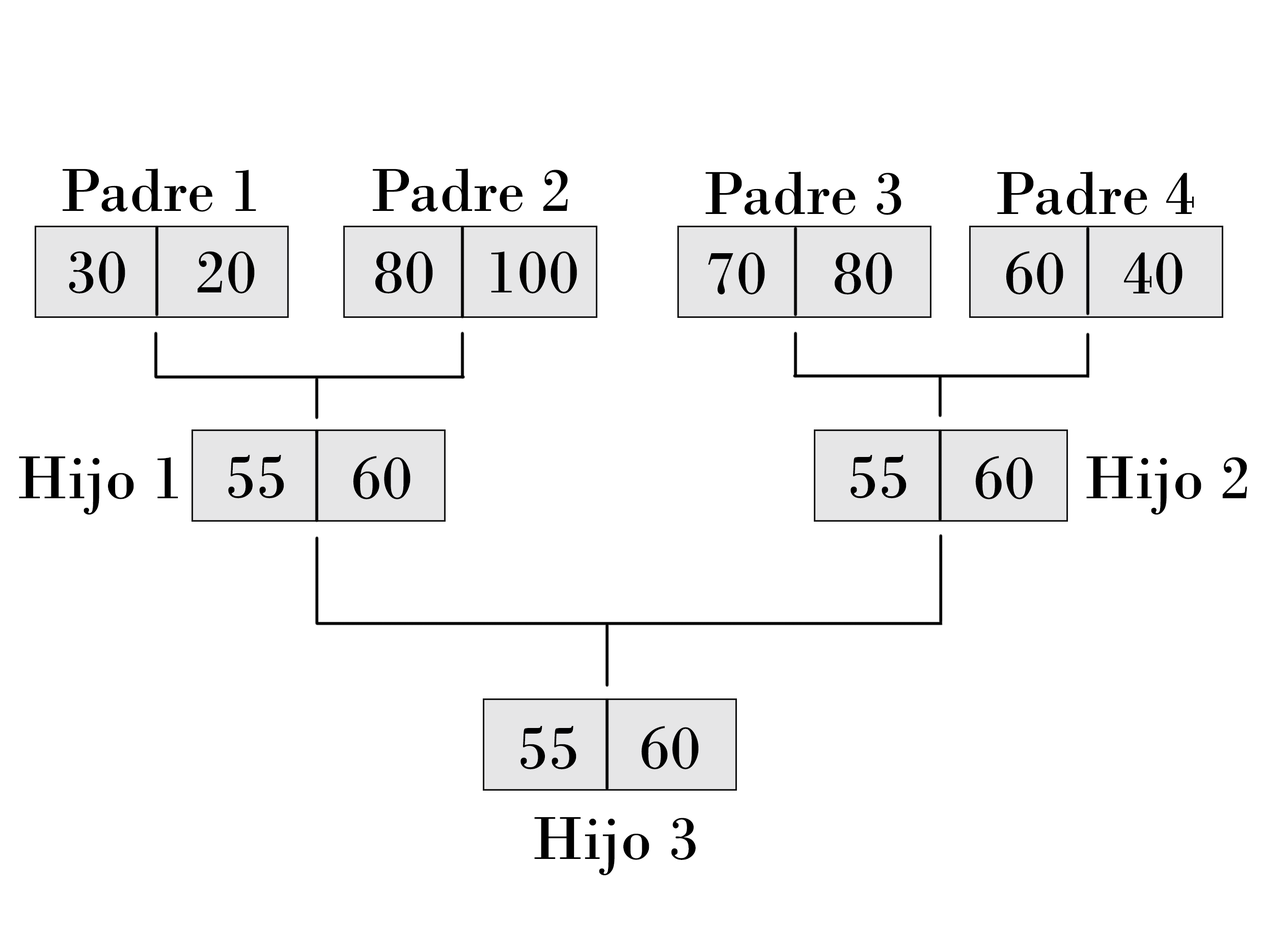
<style>
.page{position:relative;width:1263px;height:944px;background:#ffffff}
.page>*{position:absolute;margin:0}
.t1{font:63.7px "BodoniMT";color:#000000}
</style>
<div class="page">
<p class="t1" style="left:63px;top:169px;width:193px;height:43px">Padre 1</p>
<p class="t1" style="left:373px;top:169px;width:195px;height:43px">Padre 2</p>
<p class="t1" style="left:706px;top:171px;width:196px;height:44px">Padre 3</p>
<p class="t1" style="left:997px;top:172px;width:197px;height:43px">Padre 4</p>
<p class="t1" style="left:69px;top:251px;width:56px;height:42px">30</p>
<p class="t1" style="left:198px;top:251px;width:57px;height:42px">20</p>
<p class="t1" style="left:375px;top:251px;width:58px;height:42px">80</p>
<p class="t1" style="left:491px;top:251px;width:86px;height:42px">100</p>
<p class="t1" style="left:708px;top:252px;width:57px;height:42px">70</p>
<p class="t1" style="left:835px;top:252px;width:57px;height:42px">80</p>
<p class="t1" style="left:1006px;top:251px;width:58px;height:43px">60</p>
<p class="t1" style="left:1124px;top:252px;width:59px;height:42px">40</p>
<p class="t1" style="left:19px;top:456px;width:159px;height:58px">Hijo 1</p>
<p class="t1" style="left:228px;top:455px;width:56px;height:43px">55</p>
<p class="t1" style="left:353px;top:456px;width:58px;height:43px">60</p>
<p class="t1" style="left:851px;top:455px;width:56px;height:43px">55</p>
<p class="t1" style="left:975px;top:456px;width:58px;height:43px">60</p>
<p class="t1" style="left:1087px;top:456px;width:161px;height:58px">Hijo 2</p>
<p class="t1" style="left:521px;top:726px;width:56px;height:43px">55</p>
<p class="t1" style="left:641px;top:726px;width:58px;height:43px">60</p>
<p class="t1" style="left:534px;top:817px;width:162px;height:58px">Hijo 3</p>
</div>
